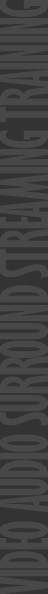
<style>
.page{position:relative;width:48px;height:594px;background:#484848}
.page>*{position:absolute;margin:0}
.t1{font:61px "GillSansMT-ExtraCondensedBold";letter-spacing:-0.025em;color:#484848}
</style>
<div class="page">
<p class="t1" style="left:0px;top:0px;width:49px;height:595px;rotate:-90deg">VIDEO AUDIO SURROUND STREAMING TRAINING</p>
</div>
